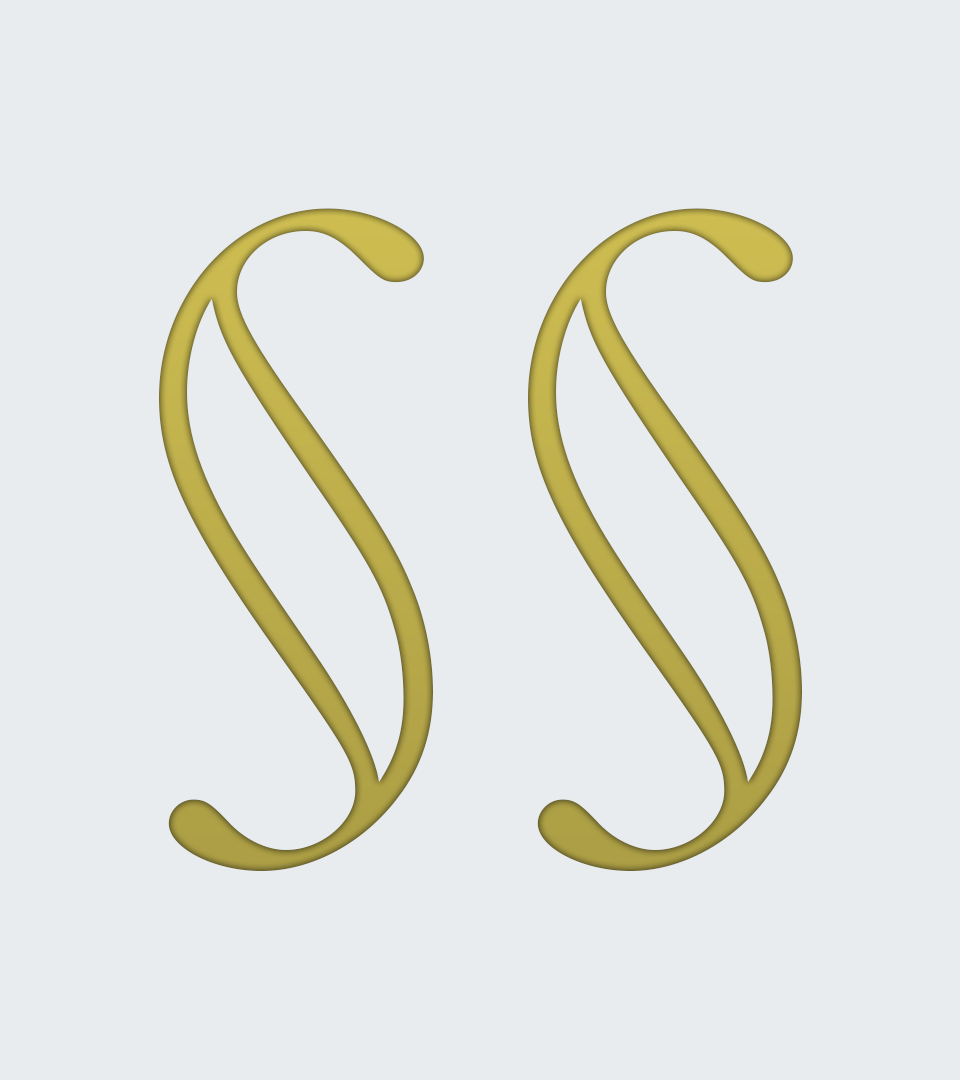
<style>
.page{position:relative;width:960px;height:1080px;background:#e9ecef}
.page>*{position:absolute;margin:0}
.t1{font:700px "BergamoPro-Regular"}
</style>
<div class="page">
<p class="t1" style="left:159px;top:208px;width:643px;height:663px">§§</p>
</div>
